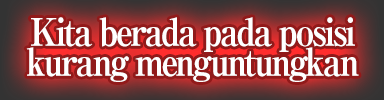
<style>
.page{position:relative;width:384px;height:100px}
.page>*{position:absolute;margin:0}
.t1{font:38px/30px "RyuminPro-ExBold";letter-spacing:-0.08em;color:#ffffff;scale:0.9 1}
</style>
<div class="page">
<p class="t1" style="left:26px;top:17px;width:333px;height:65px;text-align:center">Kita berada pada posisi<br>kurang menguntungkan</p>
</div>
